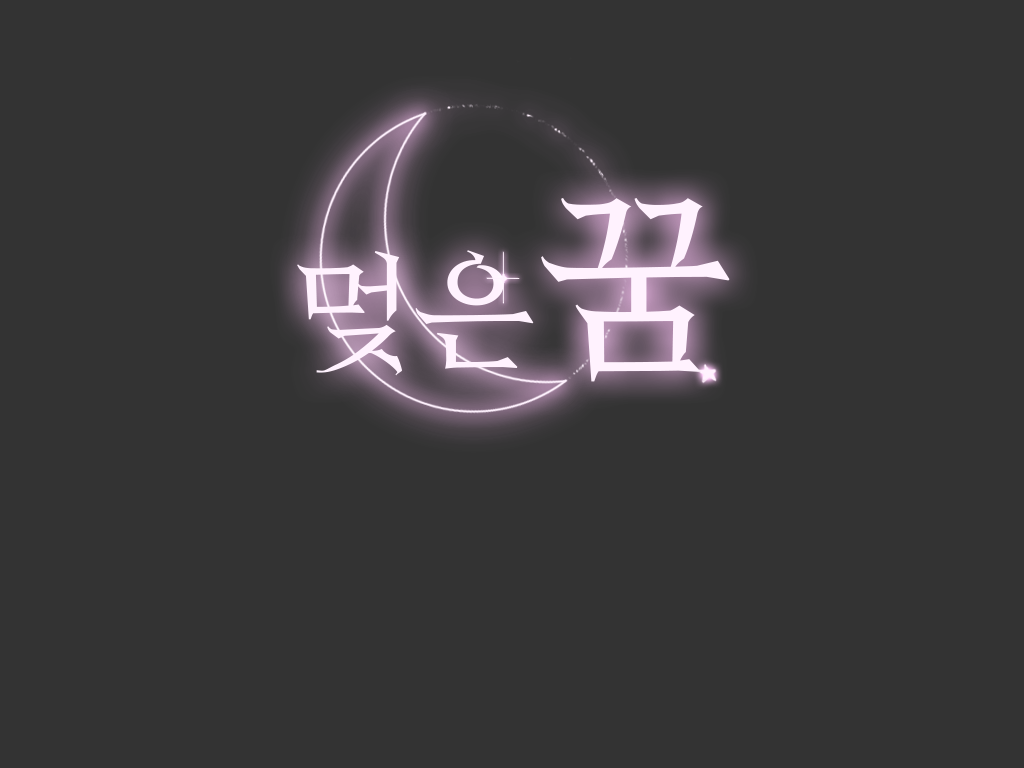
<style>
.page{position:relative;width:1024px;height:768px;background:#333333}
.page>*{position:absolute;margin:0}
.t1{font:125px "HeirofLightRegular";color:#ffffff}
.t2{font:200px "HeirofLightRegular";color:#ffffff}
</style>
<div class="page">
<p class="t1" style="left:297px;top:198px;width:433px;height:184px">멎은<span class="t2">꿈</span></p>
</div>
